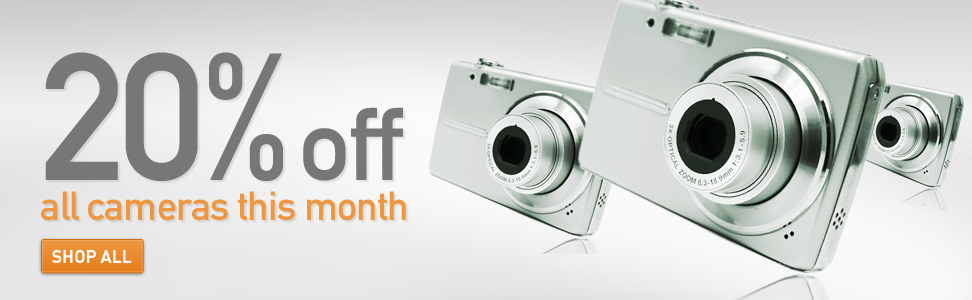
<style>
.page{position:relative;width:972px;height:300px}
.page>*{position:absolute;margin:0}
.t1{font:39.9px/40px "DINMittelschriftStd";letter-spacing:-0.02em;color:#ef9641}
.t2{font:177.5px/49.8px "DINMittelschriftStd";letter-spacing:-0.02em;color:#777777}
.t3{font:101.1px/49.8px "DINMittelschriftStd";letter-spacing:-0.02em;color:#777777}
.t4{font:18.2px "DINPro-Bold";letter-spacing:-0.02em;color:#ffffff}
</style>
<div class="page">
<p class="t1" style="left:41px;top:52px;width:365px;height:169px"><span class="t2">20%</span><span class="t3">off<br></span>all cameras this month</p>
<p class="t4" style="left:52px;top:250px;width:80px;height:13px">SHOP ALL</p>
</div>
